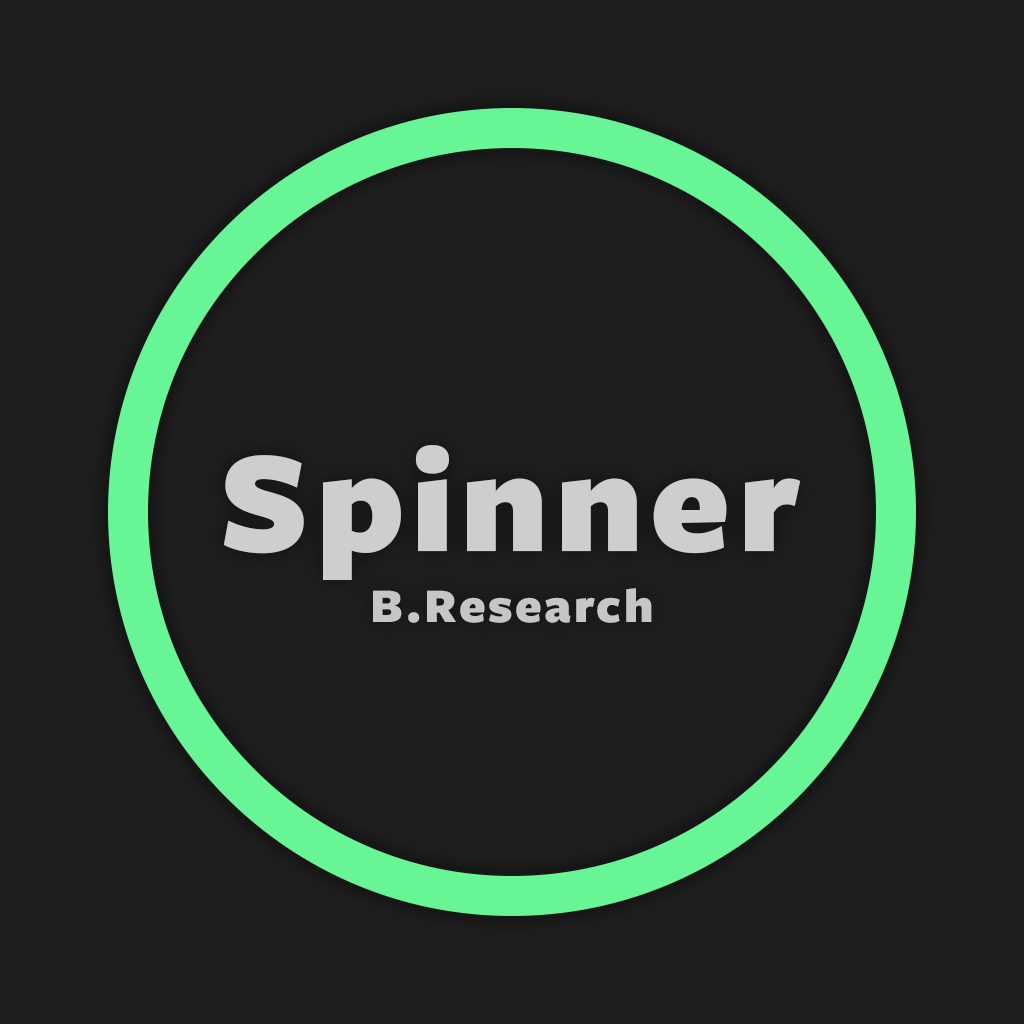
<style>
.page{position:relative;width:1024px;height:1024px;background:#1f1f1f}
.page>*{position:absolute;margin:0}
.t1{font:150px "FreightSansProBlack-Regular";letter-spacing:0.055em;color:#cecece}
.t2{font:50px "FreightSansProBlack-Regular";letter-spacing:0.055em;color:#c6c6c6}
</style>
<div class="page">
<p class="t1" style="left:223px;top:445px;width:578px;height:135px">Spinner</p>
<p class="t2" style="left:373px;top:588px;width:279px;height:35px">B.Research</p>
</div>
